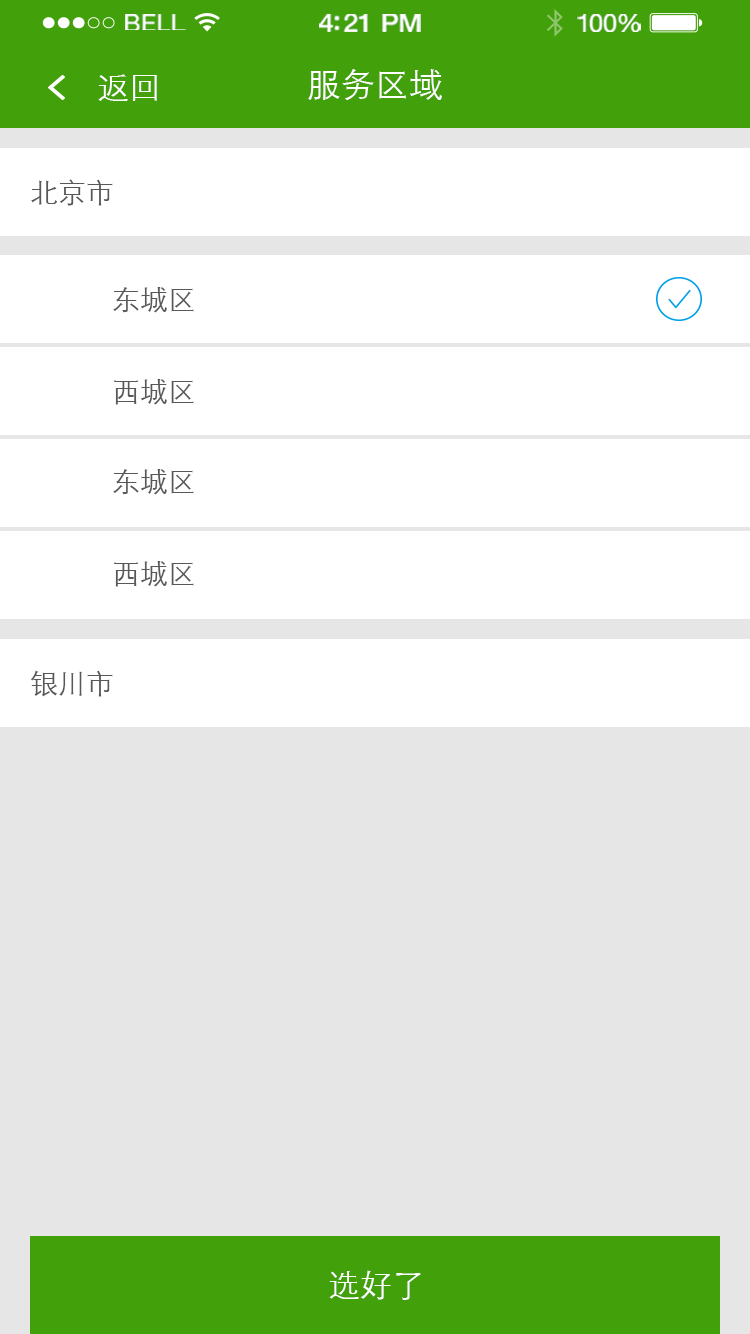
<style>
.page{position:relative;width:750px;height:1334px;background:#e6e6e6}
.page>*{position:absolute;margin:0}
.t1{font:23.3px "HelveticaNeue";letter-spacing:0.02em;color:#ffffff;scale:1.06 1}
.t2{font:25.3px "HelveticaNeue-Medium";letter-spacing:-0.02em;color:#ffffff;scale:1.06 1}
.t3{font:24.3px "HelveticaNeue";letter-spacing:-0.02em;color:#ffffff;scale:1.06 1}
.t4{font:32px "STXihei";color:#ffffff}
.t5{font:34px "STXihei";color:#ffffff}
.t6{font:28px "STXihei";color:#595757}
</style>
<div class="page">
<p class="t1" style="left:125px;top:14px;width:61px;height:16px">BELL</p>
<p class="t2" style="left:319px;top:14px;width:102px;height:18px">4:21 PM</p>
<p class="t3" style="left:577px;top:14px;width:64px;height:18px">100%</p>
<p class="t4" style="left:98px;top:74px;width:59px;height:27px">返回</p>
<p class="t5" style="left:308px;top:69px;width:134px;height:31px">服务区域</p>
<p class="t6" style="left:31px;top:179px;width:82px;height:27px">北京市</p>
<p class="t6" style="left:113px;top:287px;width:81px;height:26px">东城区</p>
<p class="t6" style="left:114px;top:379px;width:80px;height:26px">西城区</p>
<p class="t6" style="left:113px;top:469px;width:81px;height:26px">东城区</p>
<p class="t6" style="left:114px;top:561px;width:80px;height:26px">西城区</p>
<p class="t6" style="left:30px;top:670px;width:83px;height:27px">银川市</p>
<p class="t4" style="left:329px;top:1270px;width:92px;height:30px">选好了</p>
</div>
